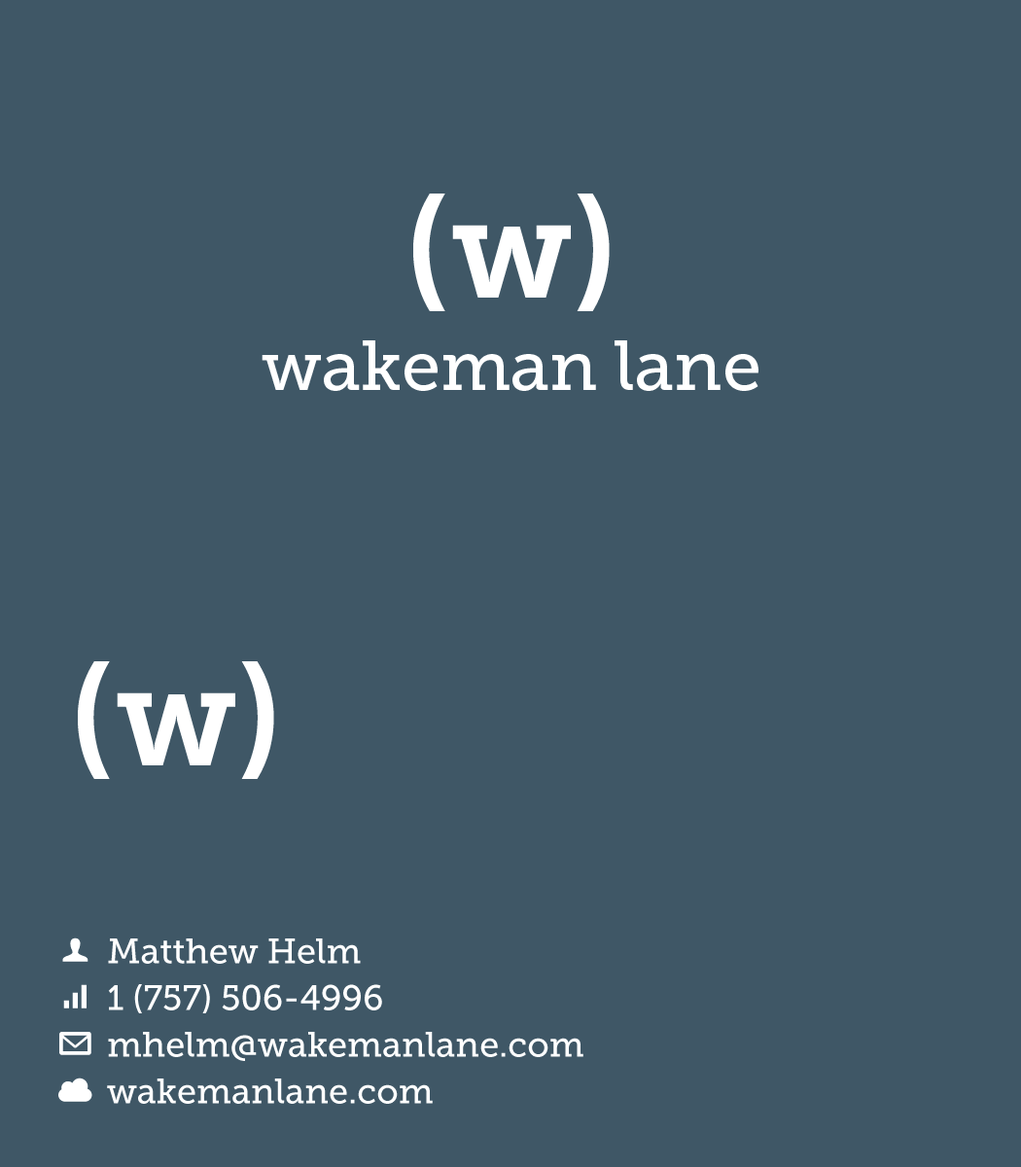
<style>
.page{position:relative;width:1021px;height:1167px;background:#3f5766}
.page>*{position:absolute;margin:0}
.t1{font:70px "MuseoSlab-500";color:#ffffff}
.t2{font:23.3px/46.7px "WebSymbols-Regular";color:#ffffff}
.t3{font:35px/46.7px "MuseoSlab-500";color:#ffffff}
</style>
<div class="page">
<p class="t1" style="left:262px;top:340px;width:497px;height:51px">wakeman lane</p>
<p class="t2" style="left:58px;top:938px;width:34px;height:164px;text-align:center">U<br>u<br>@<br>C</p>
<p class="t3" style="left:107px;top:939px;width:477px;height:165px">Matthew Helm<br>1 (757) 506-4996<br>mhelm@wakemanlane.com<br>wakemanlane.com</p>
</div>
